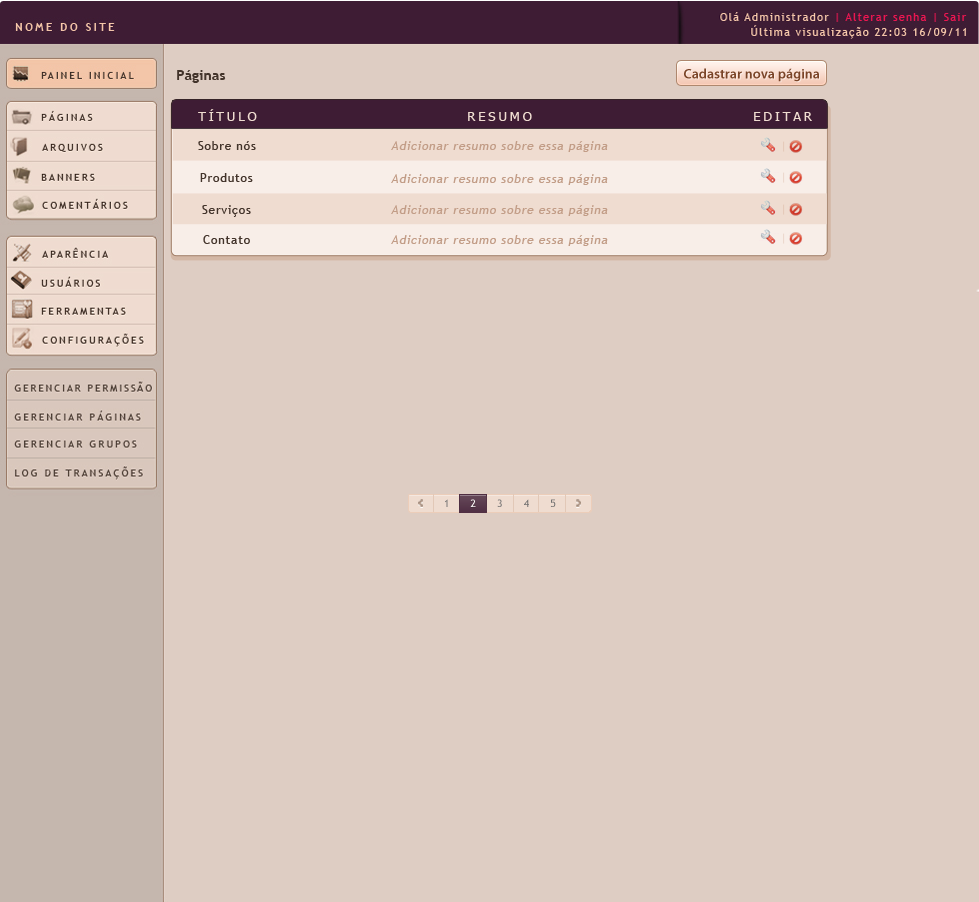
<style>
.page{position:relative;width:979px;height:902px;background:#decdc3}
.page>*{position:absolute;margin:0}
.t1{font:14.2px "TrebuchetMS-Bold";color:#43342b}
.t2{font:14px "MyriadPro-Semibold";color:#7a4427}
.t3{font:13.3px "Tahoma";letter-spacing:0.2em;color:#efdcd0;text-transform:uppercase}
.t4{font:12.3px "TrebuchetMS";letter-spacing:0.05em;color:#43342b}
.t5{font:12.3px "TrebuchetMS";letter-spacing:0.05em;color:#c29d87;font-style:italic}
.t6{font:10.4px "TrebuchetMS"}
.t7{font:10.4px "TrebuchetMS";color:#ffffff}
.t8{font:10.4px "TrebuchetMS";color:#706f6f}
</style>
<div class="page">
<p class="t1" style="left:177px;top:70px;width:49px;height:13px">Páginas</p>
<p class="t2" style="left:684px;top:68px;width:135px;height:14px">Cadastrar nova página</p>
<p class="t3" style="left:198px;top:109px;width:59px;height:12px">título</p>
<p class="t3" style="left:468px;top:112px;width:64px;height:9px">resumo</p>
<p class="t3" style="left:754px;top:112px;width:58px;height:9px">editar</p>
<p class="t4" style="left:198px;top:141px;width:58px;height:9px">Sobre nós</p>
<p class="t5" style="left:391px;top:141px;width:217px;height:11px">Adicionar resumo sobre essa página</p>
<p class="t4" style="left:200px;top:173px;width:53px;height:9px">Produtos</p>
<p class="t5" style="left:391px;top:174px;width:217px;height:11px">Adicionar resumo sobre essa página</p>
<p class="t4" style="left:202px;top:205px;width:49px;height:12px">Serviços</p>
<p class="t5" style="left:391px;top:205px;width:217px;height:11px">Adicionar resumo sobre essa página</p>
<p class="t4" style="left:203px;top:235px;width:47px;height:9px">Contato</p>
<p class="t5" style="left:391px;top:235px;width:217px;height:11px">Adicionar resumo sobre essa página</p>
<p class="t6" style="left:445px;top:499px;width:3px;height:8px">1</p>
<p class="t7" style="left:470px;top:499px;width:6px;height:8px">2</p>
<p class="t6" style="left:497px;top:499px;width:5px;height:8px">3</p>
<p class="t8" style="left:524px;top:499px;width:5px;height:8px">4</p>
<p class="t8" style="left:550px;top:499px;width:6px;height:8px">5</p>
</div>
